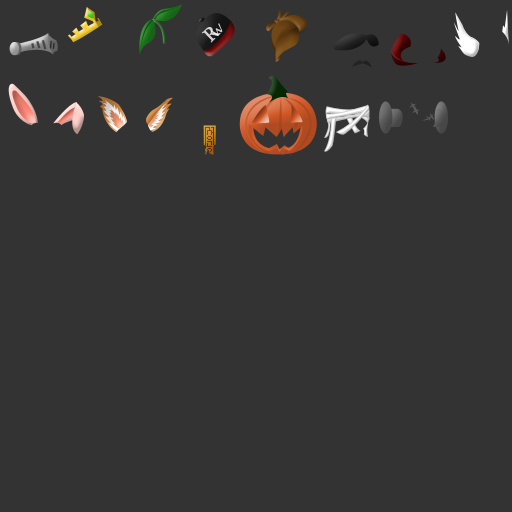
<style>
.page{position:relative;width:512px;height:512px;background:#333333}
.page>*{position:absolute;margin:0}
.t1{font:19px "Vani";color:#d4d4d4}
.t2{font:11.9px "TSTNamr";color:#d0d0d0}
</style>
<div class="page">
<p class="t1" style="left:202px;top:27px;width:19px;height:16px;rotate:-44deg">R</p>
<p class="t2" style="left:210px;top:23px;width:13px;height:13px;rotate:-44deg">W</p>
</div>
